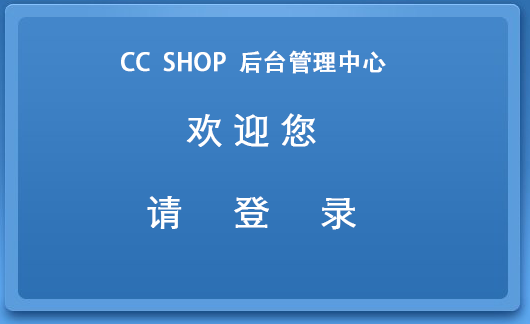
<style>
.page{position:relative;width:530px;height:324px}
.page>*{position:absolute;margin:0}
.t1{font:24px "AdobeHeitiStd-Regular";color:#ffffff;font-weight:bold}
.t2{font:36px "STXihei";color:#ffffff;font-weight:bold}
</style>
<div class="page">
<p class="t1" style="left:121px;top:50px;width:265px;height:24px">CC  SHOP  后台管理中心</p>
<p class="t2" style="left:186px;top:113px;width:130px;height:34px">欢 迎 您</p>
<p class="t2" style="left:147px;top:196px;width:209px;height:34px">请     登     录</p>
</div>
